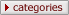
<style>
.page{position:relative;width:69px;height:15px}
.page>*{position:absolute;margin:0}
.t1{font:10px "Verdana";letter-spacing:-0.02em;color:#660000}
</style>
<div class="page">
<p class="t1" style="left:13px;top:3px;width:50px;height:10px">categories</p>
</div>
